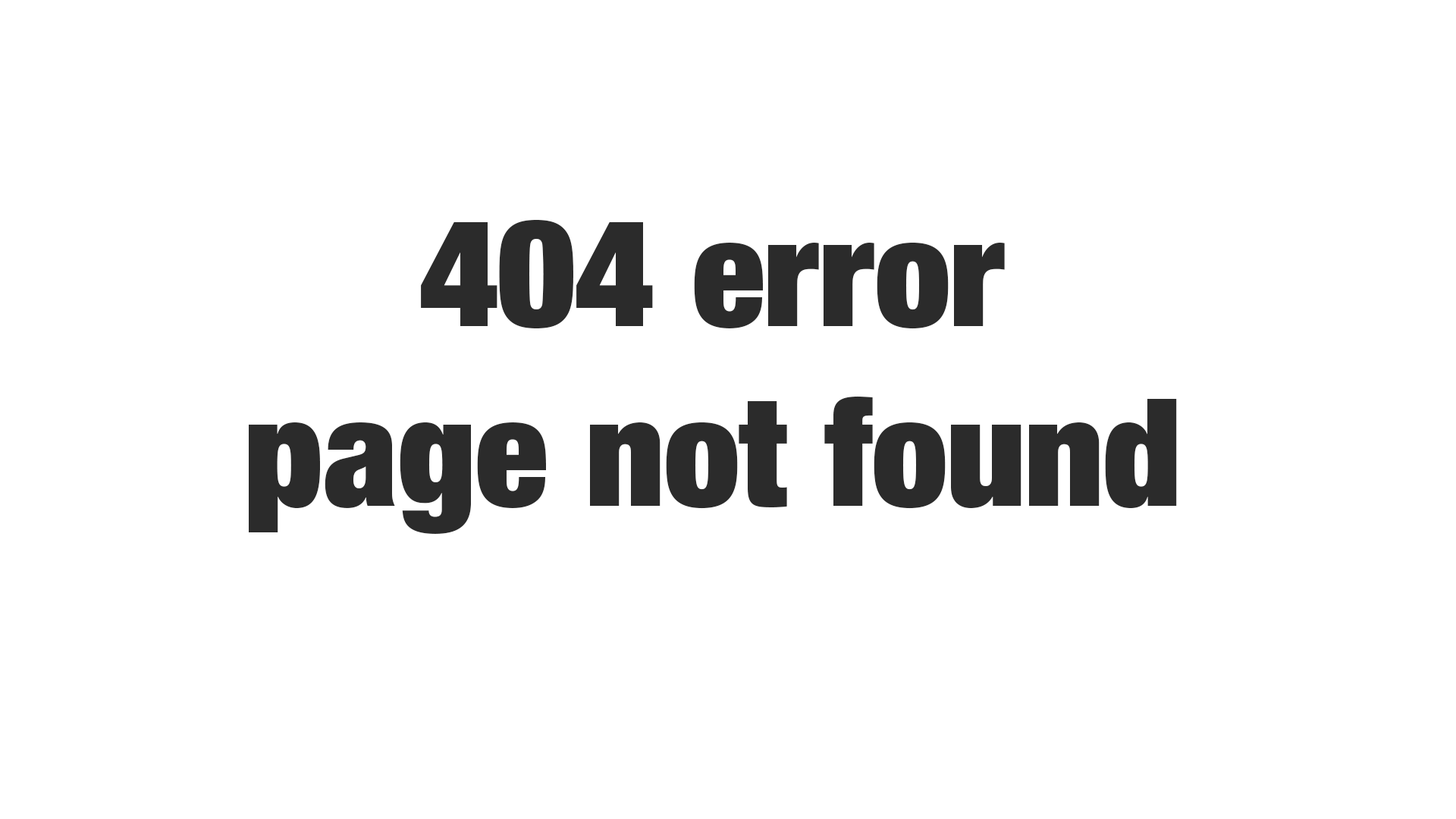
<style>
.page{position:relative;width:1456px;height:819px;background:#ffffff}
.page>*{position:absolute;margin:0}
.t1{font:149.8px "HelveticaNeueLTPro-XBlkCn";color:#2b2b2b}
</style>
<div class="page">
<p class="t1" style="left:249px;top:220px;width:928px;height:314px;text-align:center">404 error<br>page not found</p>
</div>
